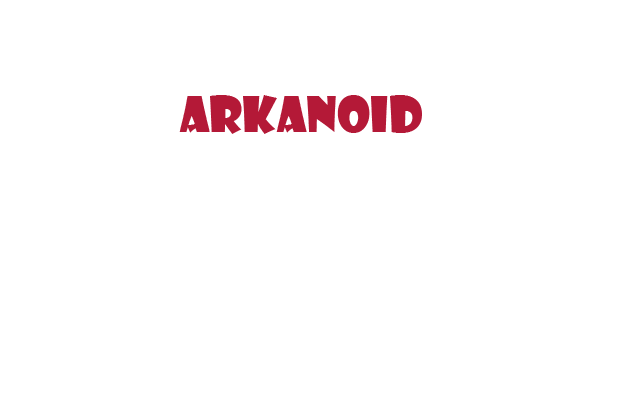
<style>
.page{position:relative;width:630px;height:412px;background:#ffffff}
.page>*{position:absolute;margin:0}
.t1{font:48px "ShowcardGothic-Reg";color:#b41937}
</style>
<div class="page">
<p class="t1" style="left:179px;top:95px;width:243px;height:39px">Arkanoid</p>
</div>
